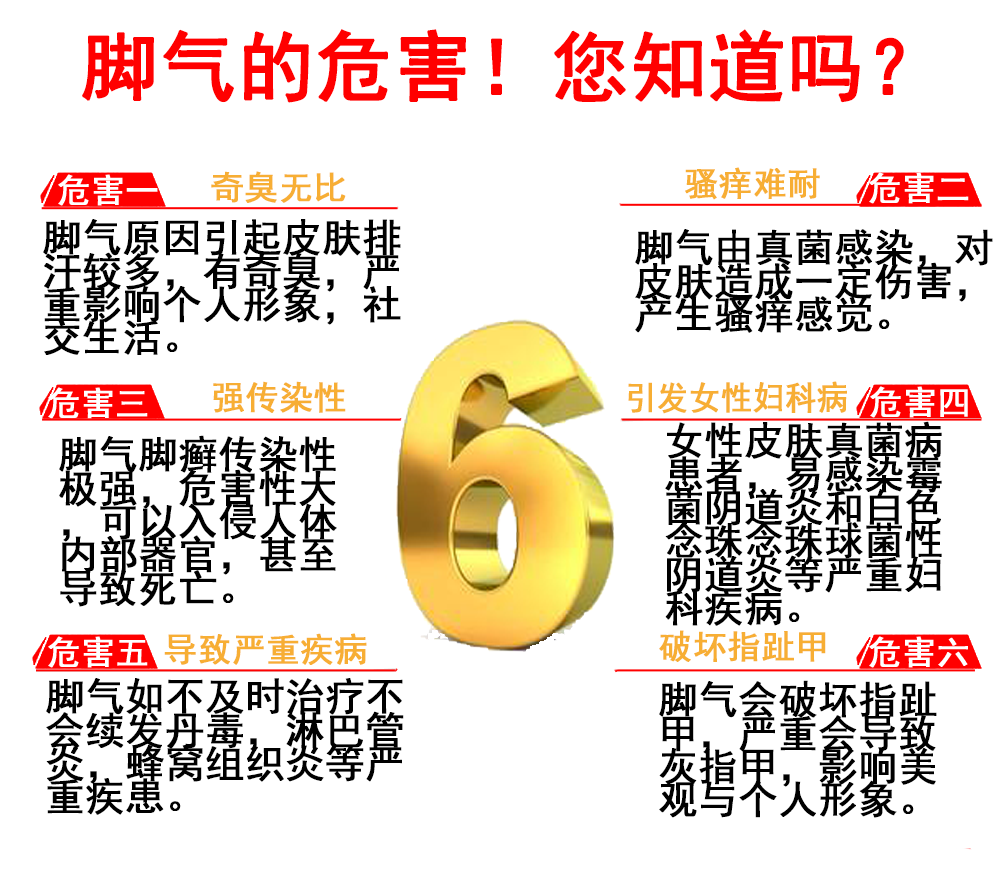
<style>
.page{position:relative;width:1000px;height:883px;background:#ffffff}
.page>*{position:absolute;margin:0}
.t1{font:76.4px "SimHei";color:#ff0000;font-weight:bold}
.t2{font:33.3px "SimHei";color:#f7ae34;font-weight:bold}
.t3{font:38.9px/33.3px "SimHei";color:#000000;font-weight:bold}
.t4{font:33.3px "SimHei";color:#f7ae34;font-weight:bold;scale:0.94 1}
</style>
<div class="page">
<p class="t1" style="left:82px;top:29px;width:822px;height:74px">脚气的危害！您知道吗？</p>
<p class="t2" style="left:211px;top:171px;width:135px;height:32px">奇臭无比</p>
<p class="t2" style="left:685px;top:167px;width:135px;height:33px">骚痒难耐</p>
<p class="t3" style="left:43px;top:219px;width:358px;height:136px">脚气原因引起皮肤排汗较多，有奇臭，严重影响个人形象，社交生活。</p>
<p class="t3" style="left:635px;top:229px;width:358px;height:104px">脚气由真菌感染，对皮肤造成一定伤害，产生骚痒感觉。</p>
<p class="t2" style="left:213px;top:381px;width:133px;height:32px">强传染性</p>
<p class="t4" style="left:628px;top:381px;width:219px;height:33px">引发女性妇科病病</p>
<p class="t3" style="left:665px;top:421px;width:277px;height:205px">女性皮肤真菌病患者，易感染霉菌阴道炎和白色念珠念珠球菌性阴道炎等严重妇科疾病。</p>
<p class="t3" style="left:59px;top:435px;width:278px;height:172px">脚气脚癣传染性极强，危害性大，可以入侵人体内部器官，甚至导致死亡。</p>
<p class="t2" style="left:659px;top:630px;width:167px;height:32px">破坏指趾甲</p>
<p class="t2" style="left:164px;top:633px;width:203px;height:32px">导致严重疾病</p>
<p class="t3" style="left:46px;top:678px;width:358px;height:137px">脚气如不及时治疗不会续发丹毒，淋巴管炎，蜂窝组织炎等严重疾患。</p>
<p class="t3" style="left:659px;top:680px;width:278px;height:138px">脚气会破坏指趾甲，严重会导致灰指甲，影响美观与个人形象。</p>
</div>
